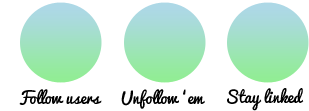
<style>
.page{position:relative;width:309px;height:111px;background:#ffffff}
.page>*{position:absolute;margin:0}
.t1{font:16px "Pacifico";color:#000000}
</style>
<div class="page">
<p class="t1" style="left:19px;top:89px;width:83px;height:16px">Follow users</p>
<p class="t1" style="left:121px;top:89px;width:84px;height:20px">Unfollow ‘em</p>
<p class="t1" style="left:227px;top:88px;width:77px;height:23px">Stay linked</p>
</div>
